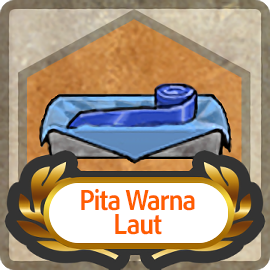
<style>
.page{position:relative;width:270px;height:270px}
.page>*{position:absolute;margin:0}
.t1{font:30px/24px "AdobeClean-Bold";letter-spacing:-0.04em;color:#ff5d00;scale:0.9 1}
</style>
<div class="page">
<p class="t1" style="left:81px;top:188px;width:114px;height:47px;text-align:center">Pita Warna<br>Laut</p>
</div>
